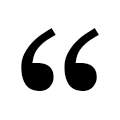
<style>
.page{position:relative;width:120px;height:120px;background:#ffffff}
.page>*{position:absolute;margin:0}
.t1{font:240.1px "Georgia";color:#000000}
</style>
<div class="page">
<p class="t1" style="left:21px;top:28px;width:78px;height:63px">“</p>
</div>
